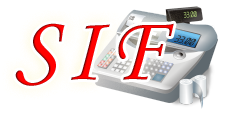
<style>
.page{position:relative;width:227px;height:115px;background:#ffffff}
.page>*{position:absolute;margin:0}
.t1{font:94.4px "MonotypeCorsiva";letter-spacing:0.08em;color:#ff0101}
</style>
<div class="page">
<p class="t1" style="left:15px;top:23px;width:159px;height:63px">SIF</p>
</div>
